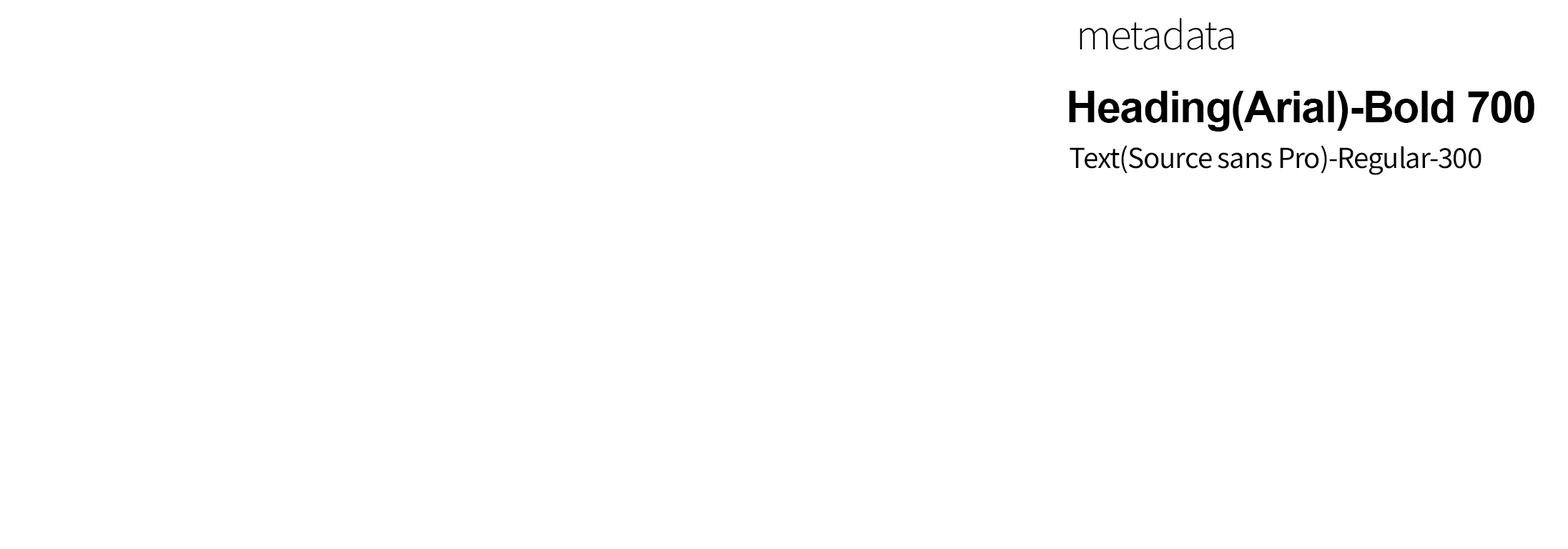
<style>
.page{position:relative;width:1568px;height:549px;background:#ffffff}
.page>*{position:absolute;margin:0}
.t1{font:43.6px "SourceSansPro-Light";letter-spacing:-0.025em;color:#000000}
.t2{font:43.6px "Arial-BoldMT";letter-spacing:-0.025em;color:#000000}
.t3{font:30.7px "SourceSansPro-Regular";letter-spacing:-0.025em;color:#000000}
</style>
<div class="page">
<p class="t1" style="left:1080px;top:18px;width:154px;height:32px">metadata</p>
<p class="t2" style="left:1069px;top:91px;width:465px;height:41px">Heading(Arial)-Bold 700</p>
<p class="t3" style="left:1070px;top:145px;width:411px;height:30px">Text(Source sans Pro)-Regular-300</p>
</div>
